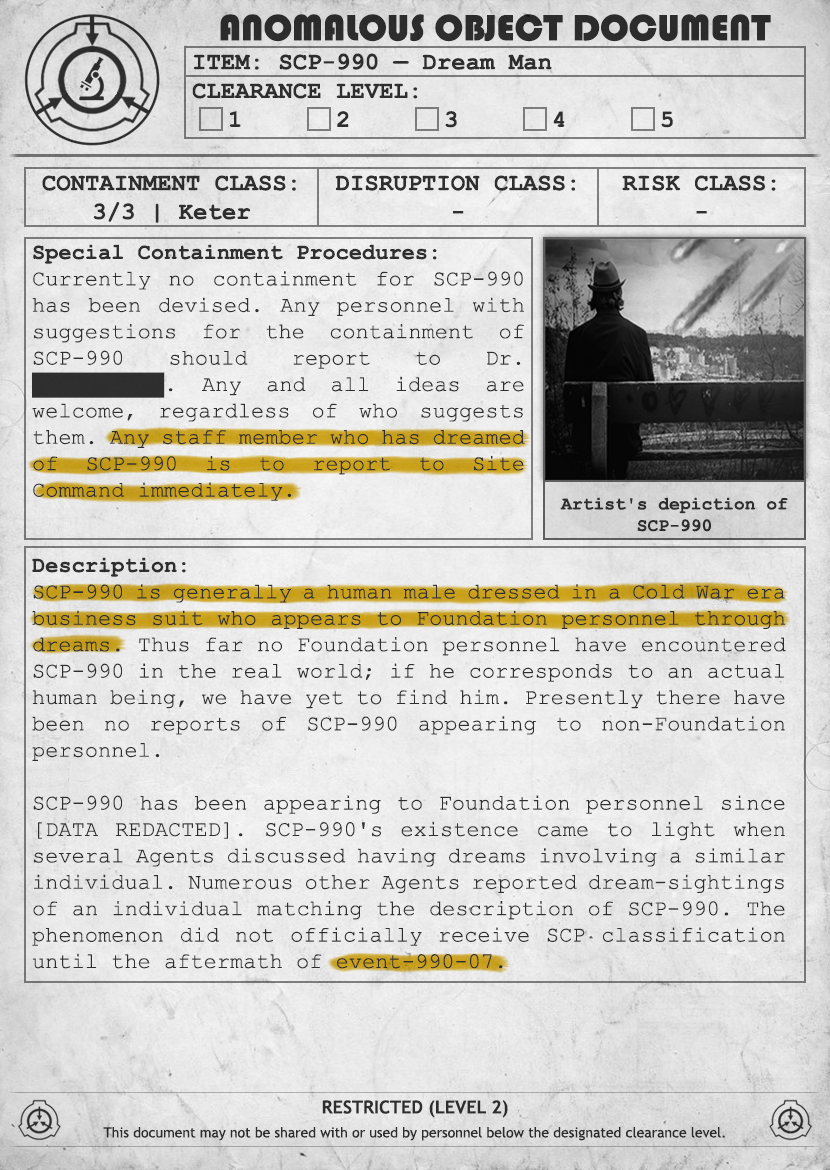
<style>
.page{position:relative;width:830px;height:1170px}
.page>*{position:absolute;margin:0}
.t1{font:38px "Bauhaus93";color:#333333;text-transform:uppercase}
.t2{font:24px "CourierNewPS-BoldMT";color:#333333}
.t3{font:24px "CourierNewPS-BoldMT";color:#333333;text-transform:uppercase}
.t4{font:22px "CourierNewPSMT";color:#333333}
.t5{font:22px "CourierNewPS-BoldMT";color:#333333}
.t6{font:18px "CourierNewPS-BoldMT";color:#333333}
.t7{font:14px/24px "TrebuchetMS";color:#333333}
.t8{font:18px/24px "TrebuchetMS-Bold";color:#333333}
</style>
<div class="page">
<p class="t1" style="left:220px;top:14px;width:551px;height:28px">anomalous object document</p>
<p class="t2" style="left:192px;top:53px;width:481px;height:75px">ITEM: SCP-990 — Dream Man<br><span class="t3">CLEARANCE LEVEL:</span> <br> 1   2   3   4   5</p>
<p class="t2" style="left:42px;top:175px;width:254px;height:48px;text-align:center">CONTAINMENT CLASS:<br>3/3 | Keter</p>
<p class="t2" style="left:335px;top:175px;width:241px;height:39px;text-align:center">DISRUPTION CLASS:<br>-</p>
<p class="t2" style="left:622px;top:175px;width:154px;height:39px;text-align:center">RISK CLASS:<br>-</p>
<p class="t4" style="left:32px;top:244px;width:493px;height:257px;text-align:justify"><span class="t5">Special Containment Procedures:<br></span>Currently no containment for SCP-990 has been devised. Any personnel with suggestions for the containment of SCP-990 should report to Dr. ██████████. Any and all ideas are welcome, regardless of who suggests them. Any staff member who has dreamed of SCP-990 is to report to Site Command immediately.</p>
<p class="t6" style="left:560px;top:497px;width:228px;height:35px;text-align:center">Artist's depiction of SCP-990</p>
<p class="t4" style="left:32px;top:557px;width:754px;height:412px;text-align:justify"><span class="t5">Description:<br></span>SCP-990 is generally a human male dressed in a Cold War era business suit who appears to Foundation personnel through dreams. Thus far no Foundation personnel have encountered SCP-990 in the real world; if he corresponds to an actual human being, we have yet to find him. Presently there have been no reports of SCP-990 appearing to non-Foundation personnel.<br><br>SCP-990 has been appearing to Foundation personnel since [DATA REDACTED]. SCP-990's existence came to light when several Agents discussed having dreams involving a similar individual. Numerous other Agents reported dream-sightings of an individual matching the description of SCP-990. The phenomenon did not officially receive SCP classification until the aftermath of event-990-07.</p>
<p class="t7" style="left:103px;top:1100px;width:622px;height:41px;text-align:center"><span class="t8">RESTRICTED (LEVEL 2)<br></span>This document may not be shared with or used by personnel below the designated clearance level.</p>
</div>
